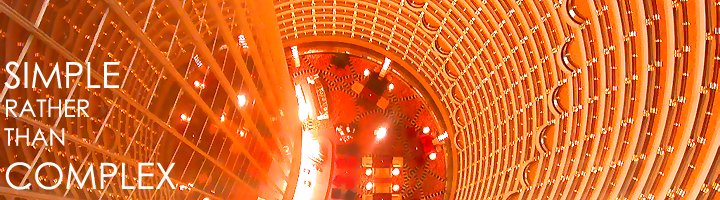
<style>
.page{position:relative;width:720px;height:200px}
.page>*{position:absolute;margin:0}
.t1{font:24px "CenturyGothic";color:#ffffff}
.t2{font:36px "CenturyGothic";color:#ffffff}
</style>
<div class="page">
<p class="t1" style="left:4px;top:61px;width:172px;height:129px"><span class="t2">SIMPLE<br></span>RATHER<br>THAN<br><span class="t2">COMPLEX</span></p>
</div>
